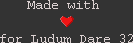
<style>
.page{position:relative;width:133px;height:43px;background:#333333}
.page>*{position:absolute;margin:0}
.t1{font:14px "CourierNewPSMT";color:#dbd1d1}
</style>
<div class="page">
<p class="t1" style="left:0px;top:0px;width:133px;height:43px;text-align:center">Made with <br><br>for Ludum Dare 32</p>
</div>
